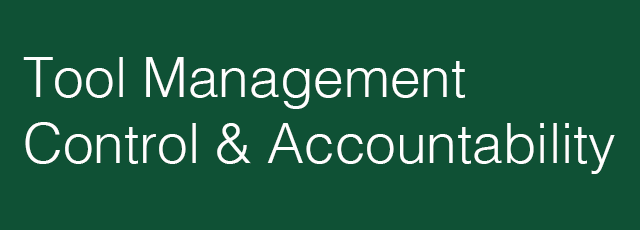
<style>
.page{position:relative;width:640px;height:230px;background:#0f5135}
.page>*{position:absolute;margin:0}
.t1{font:55px "Helvetica-Light";color:#fefefe}
</style>
<div class="page">
<p class="t1" style="left:23px;top:57px;width:592px;height:117px">Tool Management <br>Control &amp; Accountability</p>
</div>
